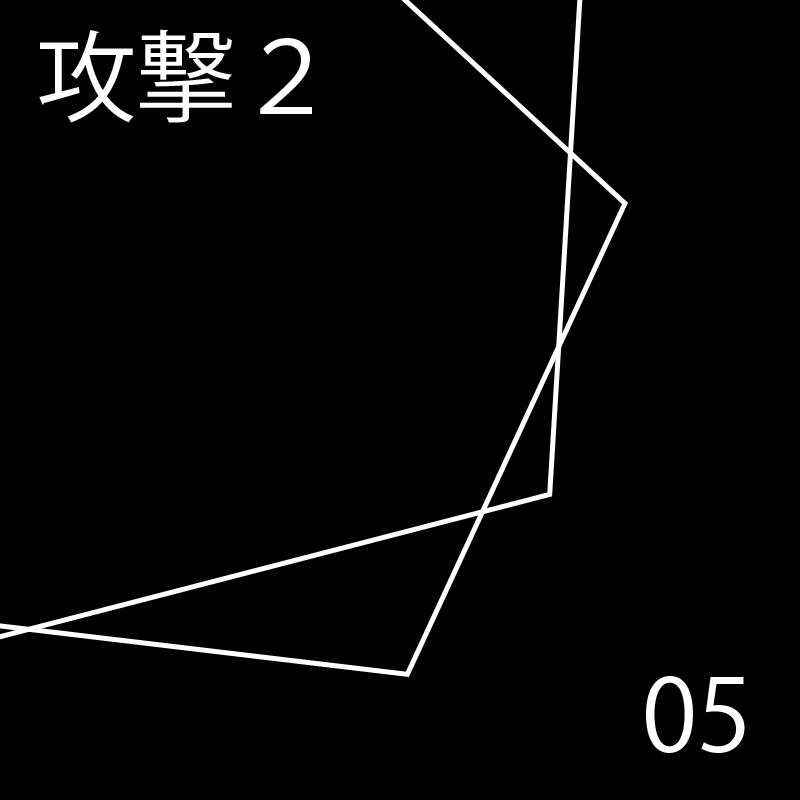
<style>
.page{position:relative;width:800px;height:800px;background:#010101}
.page>*{position:absolute;margin:0}
.t1{font:100px "KozGoPr6N-Regular";color:#ffffff}
</style>
<div class="page">
<p class="t1" style="left:39px;top:29px;width:273px;height:94px">攻撃２</p>
<p class="t1" style="left:39px;top:29px;width:273px;height:94px">攻撃２</p>
<p class="t1" style="left:39px;top:29px;width:273px;height:94px">攻撃２</p>
<p class="t1" style="left:39px;top:29px;width:273px;height:94px">攻撃２</p>
<p class="t1" style="left:39px;top:29px;width:273px;height:94px">攻撃２</p>
<p class="t1" style="left:39px;top:29px;width:273px;height:94px">攻撃２</p>
<p class="t1" style="left:646px;top:676px;width:102px;height:77px">00</p>
<p class="t1" style="left:646px;top:676px;width:85px;height:77px">01</p>
<p class="t1" style="left:646px;top:676px;width:101px;height:77px">02</p>
<p class="t1" style="left:646px;top:676px;width:99px;height:77px">03</p>
<p class="t1" style="left:646px;top:676px;width:105px;height:77px">04</p>
<p class="t1" style="left:646px;top:676px;width:99px;height:77px">05</p>
</div>
